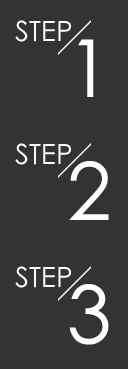
<style>
.page{position:relative;width:128px;height:369px;background:#333333}
.page>*{position:absolute;margin:0}
.t1{font:28px "STXihei";color:#ffffff}
.t2{font:80px "STXihei";letter-spacing:0.02em;color:#ffffff}
</style>
<div class="page">
<p class="t1" style="left:15px;top:143px;width:56px;height:22px">STEP</p>
<p class="t2" style="left:69px;top:161px;width:40px;height:59px">2</p>
<p class="t1" style="left:15px;top:266px;width:56px;height:22px">STEP</p>
<p class="t2" style="left:69px;top:284px;width:40px;height:61px">3</p>
</div>
